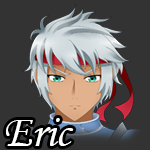
<style>
.page{position:relative;width:150px;height:150px;background:#333333}
.page>*{position:absolute;margin:0}
.t1{font:45px "MonotypeCorsiva";color:#ffffff}
</style>
<div class="page">
<p class="t1" style="left:6px;top:118px;width:68px;height:28px">Eric</p>
</div>
